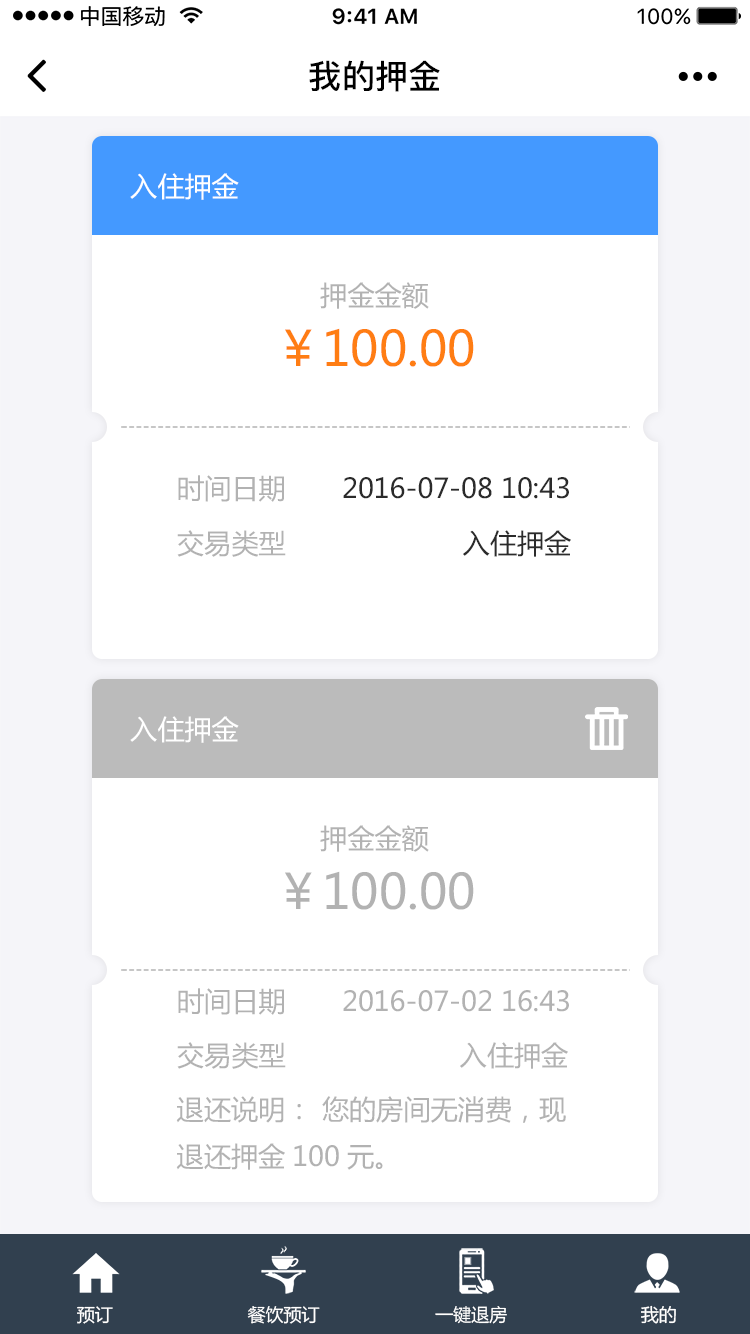
<style>
.page{position:relative;width:750px;height:1334px;background:#ffffff}
.page>*{position:absolute;margin:0}
.t1{font:33.2px "PingFang-SC-Bold";color:#000000}
.t2{font:27.2px "MicrosoftYaHei";color:#ffffff}
.t3{font:27.2px "MicrosoftYaHei";color:#b2b2b2}
.t4{font:48.3px "MicrosoftYaHei";color:#ff7d13}
.t5{font:27.2px "MicrosoftYaHei";color:#2b2b2b}
.t6{font:48.3px "MicrosoftYaHei";color:#b2b2b2}
.t7{font:18px "MicrosoftYaHei";color:#ffffff}
</style>
<div class="page">
<p class="t1" style="left:309px;top:60px;width:131px;height:32px">我的押金</p>
<p class="t2" style="left:130px;top:173px;width:109px;height:27px">入住押金</p>
<p class="t3" style="left:320px;top:282px;width:109px;height:27px">押金金额</p>
<p class="t4" style="left:285px;top:328px;width:189px;height:39px">￥100.00</p>
<p class="t3" style="left:178px;top:475px;width:106px;height:27px">时间日期</p>
<p class="t5" style="left:343px;top:477px;width:226px;height:22px">2016-07-08 10:43</p>
<p class="t3" style="left:177px;top:530px;width:109px;height:27px">交易类型</p>
<p class="t5" style="left:463px;top:530px;width:108px;height:27px">入住押金</p>
<p class="t2" style="left:130px;top:716px;width:109px;height:27px">入住押金</p>
<p class="t3" style="left:320px;top:825px;width:109px;height:27px">押金金额</p>
<p class="t6" style="left:285px;top:871px;width:189px;height:39px">￥100.00</p>
<p class="t3" style="left:178px;top:988px;width:106px;height:27px">时间日期</p>
<p class="t3" style="left:343px;top:990px;width:226px;height:22px">2016-07-02 16:43</p>
<p class="t3" style="left:177px;top:1042px;width:109px;height:27px">交易类型</p>
<p class="t3" style="left:460px;top:1042px;width:108px;height:27px">入住押金</p>
<p class="t3" style="left:176px;top:1096px;width:390px;height:74px">退还说明：  您的房间无消费，现<br>退还押金100元。</p>
<p class="t7" style="left:77px;top:1306px;width:36px;height:18px">预订</p>
<p class="t7" style="left:247px;top:1306px;width:73px;height:18px">餐饮预订</p>
<p class="t7" style="left:435px;top:1306px;width:72px;height:18px">一键退房</p>
<p class="t7" style="left:641px;top:1305px;width:35px;height:19px">我的</p>
</div>
